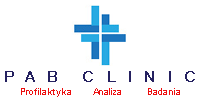
<style>
.page{position:relative;width:200px;height:102px;background:#ffffff}
.page>*{position:absolute;margin:0}
.t1{font:15px "ArialMT";letter-spacing:0.01em;color:#252160;font-weight:bold}
.t2{font:9px "ArialMT";letter-spacing:0.01em;color:#ed0e0e}
</style>
<div class="page">
<p class="t1" style="left:5px;top:71px;width:190px;height:11px">P A B  C L I N I C</p>
<p class="t2" style="left:21px;top:88px;width:159px;height:9px">Profilaktyka Analiza Badania</p>
</div>
